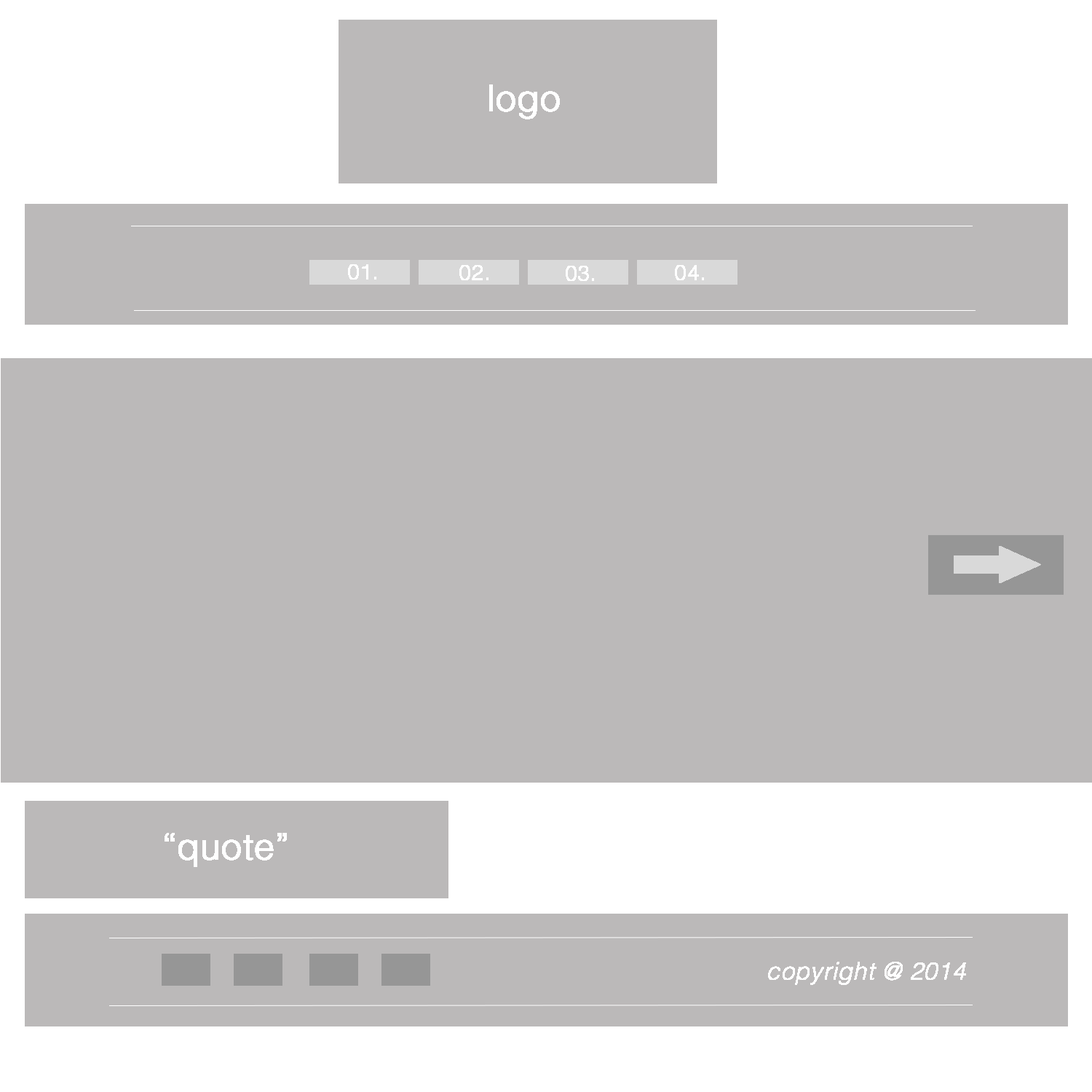
<style>
.page{position:relative;width:1092px;height:1092px;background:#bbb9b9}
.page>*{position:absolute;margin:0}
.t1{font:36.4px "Helvetica-Light";color:#ffffff;font-weight:bold}
.t2{font:21.2px "Helvetica-Light";color:#ffffff;font-weight:bold}
.t3{font:24.3px "Helvetica-LightOblique";color:#ffffff;font-weight:bold}
</style>
<div class="page">
<p class="t1" style="left:489px;top:84px;width:71px;height:35px">logo</p>
<p class="t2" style="left:348px;top:264px;width:28px;height:16px">01.</p>
<p class="t2" style="left:459px;top:265px;width:29px;height:15px">02.</p>
<p class="t2" style="left:566px;top:266px;width:28px;height:15px">03.</p>
<p class="t2" style="left:675px;top:265px;width:29px;height:15px">04.</p>
<p class="t1" style="left:165px;top:833px;width:122px;height:34px">“quote”</p>
<p class="t3" style="left:768px;top:962px;width:198px;height:23px">copyright @ 2014</p>
</div>
